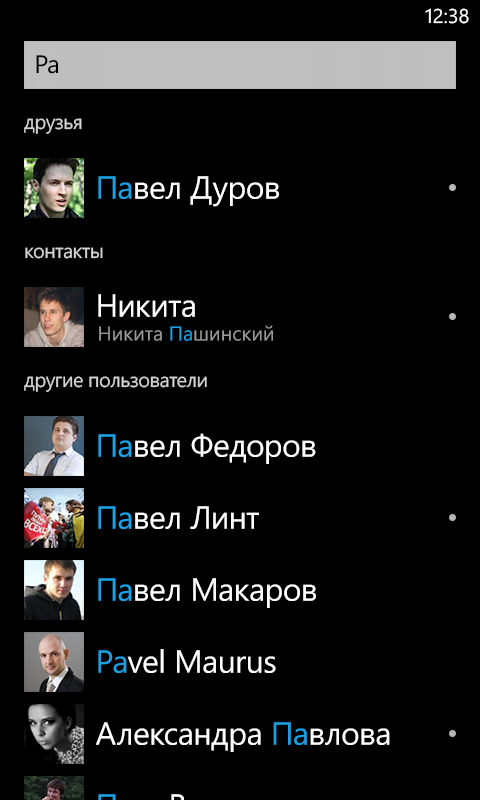
<style>
.page{position:relative;width:480px;height:800px;background:#000000}
.page>*{position:absolute;margin:0}
.t1{font:20px "SegoeWP";color:#ffffff}
.t2{font:25.3px "SegoeWP";letter-spacing:-0.025em;color:#000000}
.t3{font:32px "SegoeWP";letter-spacing:-0.01em;color:#ffffff}
.t4{font:32px "SegoeWP";letter-spacing:-0.01em;color:#1ba1e2}
.t5{font:20px "SegoeWP";color:#999999}
.t6{font:20px "SegoeWP";color:#1ba1e2}
</style>
<div class="page">
<p class="t1" style="left:425px;top:8px;width:44px;height:16px">12:38</p>
<p class="t2" style="left:36px;top:55px;width:22px;height:19px">Pa</p>
<p class="t3" style="left:98px;top:176px;width:181px;height:31px"><span class="t4">Па</span>вел Дуров</p>
<p class="t3" style="left:98px;top:294px;width:97px;height:23px">Никита</p>
<p class="t5" style="left:99px;top:325px;width:174px;height:16px">Никита <span class="t6">Па</span>шинский</p>
<p class="t3" style="left:98px;top:433px;width:218px;height:31px"><span class="t4">Па</span>вел Федоров</p>
<p class="t3" style="left:98px;top:506px;width:161px;height:23px"><span class="t4">Па</span>вел Линт</p>
<p class="t3" style="left:98px;top:578px;width:218px;height:30px"><span class="t4">Па</span>вел Макаров</p>
<p class="t3" style="left:98px;top:649px;width:178px;height:24px"><span class="t4">Pa</span>vel Maurus</p>
<p class="t3" style="left:96px;top:722px;width:294px;height:30px">Александра <span class="t4">Па</span>влова</p>
</div>
